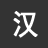
<style>
.page{position:relative;width:48px;height:48px;background:#333333}
.page>*{position:absolute;margin:0}
.t1{font:28.9px "SimHei";letter-spacing:0.04em;color:#ffffff;font-weight:bold;scale:0.9 1}
</style>
<div class="page">
<p class="t1" style="left:13px;top:11px;width:25px;height:27px">汉</p>
</div>
